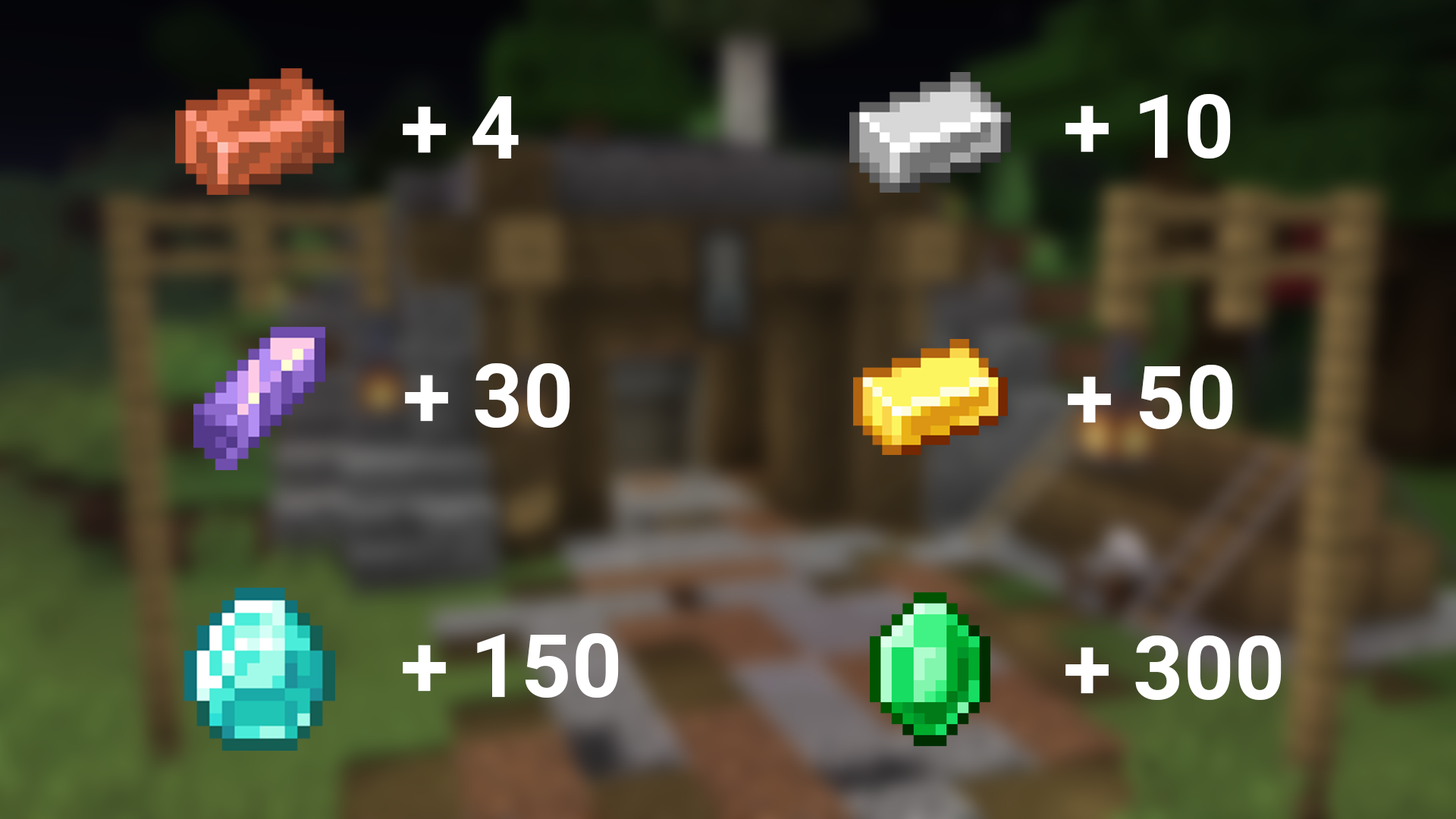
<style>
.page{position:relative;width:1456px;height:819px}
.page>*{position:absolute;margin:0}
.t1{font:88.3px "Roboto-Bold";color:#ffffff}
</style>
<div class="page">
<p class="t1" style="left:403px;top:96px;width:116px;height:62px">+ 4</p>
<p class="t1" style="left:1065px;top:94px;width:166px;height:64px">+ 10</p>
<p class="t1" style="left:405px;top:363px;width:165px;height:65px">+ 30</p>
<p class="t1" style="left:1068px;top:365px;width:165px;height:64px">+ 50</p>
<p class="t1" style="left:403px;top:633px;width:216px;height:65px">+ 150</p>
<p class="t1" style="left:1065px;top:635px;width:217px;height:65px">+ 300</p>
</div>
